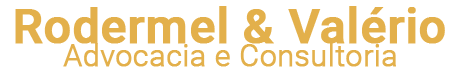
<style>
.page{position:relative;width:459px;height:73px;background:#ffffff}
.page>*{position:absolute;margin:0}
.t1{font:48px "Roboto-Medium";color:#e3b04b;font-weight:bold}
.t2{font:30px "Roboto-Light";color:#e3b04b;font-weight:bold}
</style>
<div class="page">
<p class="t1" style="left:15px;top:6px;width:430px;height:38px">Rodermel &amp; Valério</p>
<p class="t2" style="left:63px;top:43px;width:333px;height:24px">Advocacia e Consultoria</p>
</div>
